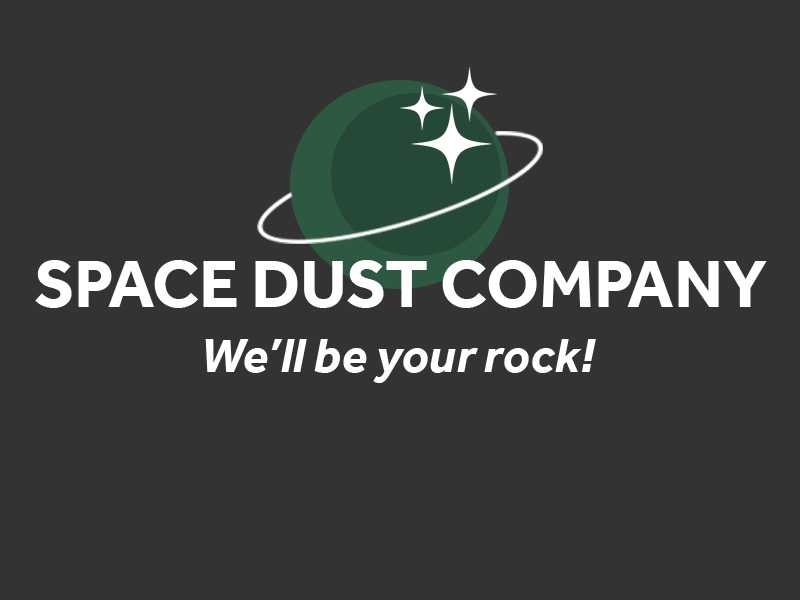
<style>
.page{position:relative;width:800px;height:600px;background:#333333}
.page>*{position:absolute;margin:0}
.t1{font:68.6px "Effra-Bold";color:#ffffff}
.t2{font:50.2px "Effra-BoldItalic";color:#ffffff}
</style>
<div class="page">
<p class="t1" style="left:35px;top:260px;width:732px;height:48px">SPACE DUST COMPANY</p>
<p class="t2" style="left:205px;top:339px;width:391px;height:44px">We’ll be your rock!</p>
</div>
